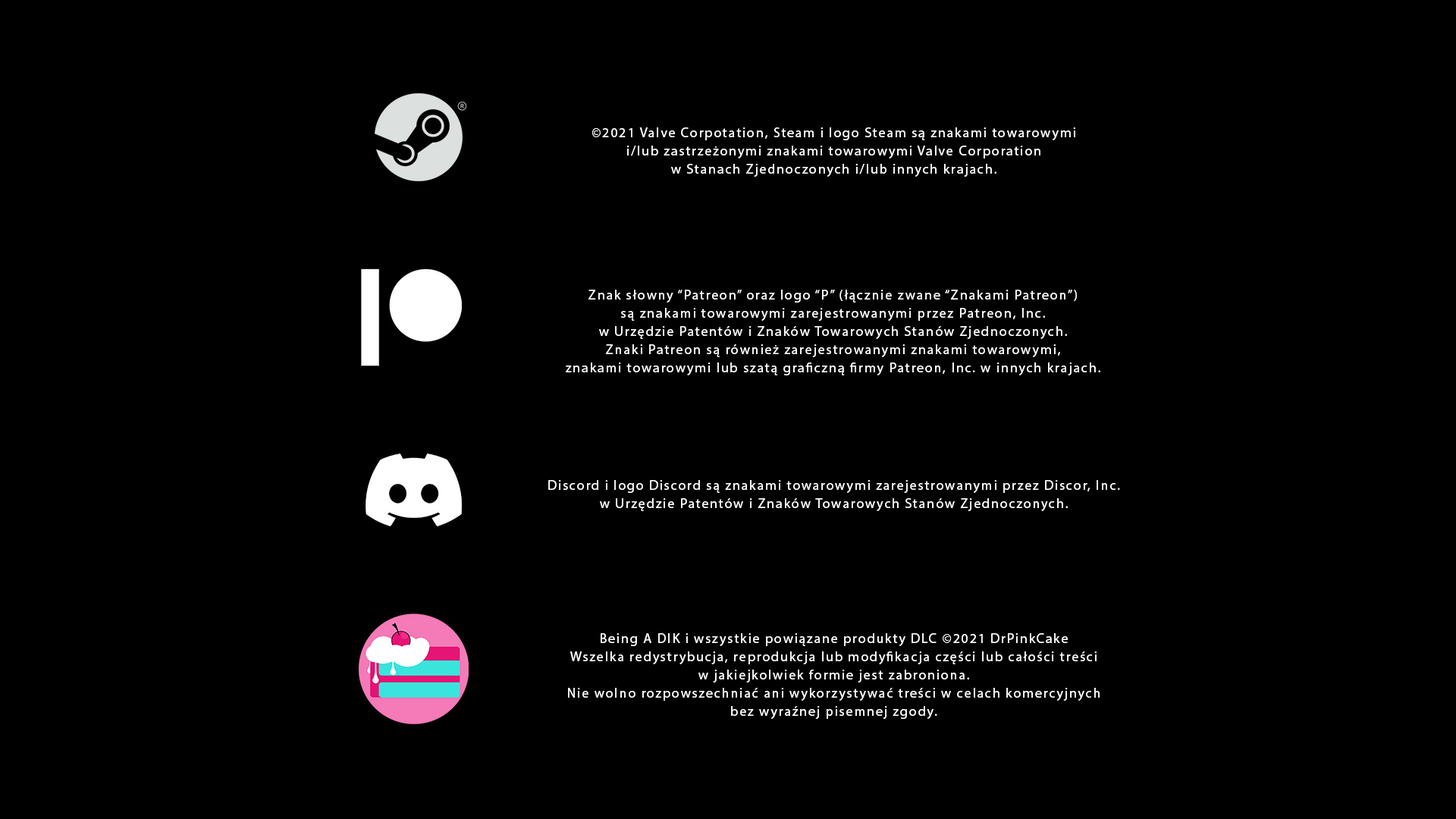
<style>
.page{position:relative;width:1456px;height:819px;background:#000000}
.page>*{position:absolute;margin:0}
.t1{font:13.6px/18.2px "MyriadPro-Regular";letter-spacing:0.1em;color:#ffffff}
</style>
<div class="page">
<p class="t1" style="left:591px;top:127px;width:484px;height:50px;text-align:center">©2021 Valve Corpotation, Steam i logo Steam są znakami towarowymi<br>i/lub zastrzeżonymi znakami towarowymi Valve Corporation<br>w Stanach Zjednoczonych i/lub innych krajach.</p>
<p class="t1" style="left:566px;top:290px;width:534px;height:85px;text-align:center">Znak słowny “Patreon” oraz logo “P” (łącznie zwane “Znakami Patreon”)<br>są znakami towarowymi zarejestrowanymi przez Patreon, Inc.<br>w Urzędzie Patentów i Znaków Towarowych Stanów Zjednoczonych.<br>Znaki Patreon są również zarejestrowanymi znakami towarowymi,<br>znakami towarowymi lub szatą graficzną firmy Patreon, Inc. w innych krajach.</p>
<p class="t1" style="left:548px;top:480px;width:572px;height:31px;text-align:center">Discord i logo Discord są znakami towarowymi zarejestrowanymi przez Discor, Inc.<br>w Urzędzie Patentów i Znaków Towarowych Stanów Zjednoczonych.</p>
<p class="t1" style="left:568px;top:633px;width:532px;height:86px;text-align:center">Being A DIK i wszystkie powiązane produkty DLC ©2021 DrPinkCake<br>Wszelka redystrybucja, reprodukcja lub modyfikacja części lub całości treści<br>w jakiejkolwiek formie jest zabroniona.<br>Nie wolno rozpowszechniać ani wykorzystywać treści w celach komercyjnych<br>bez wyraźnej pisemnej zgody.</p>
</div>
